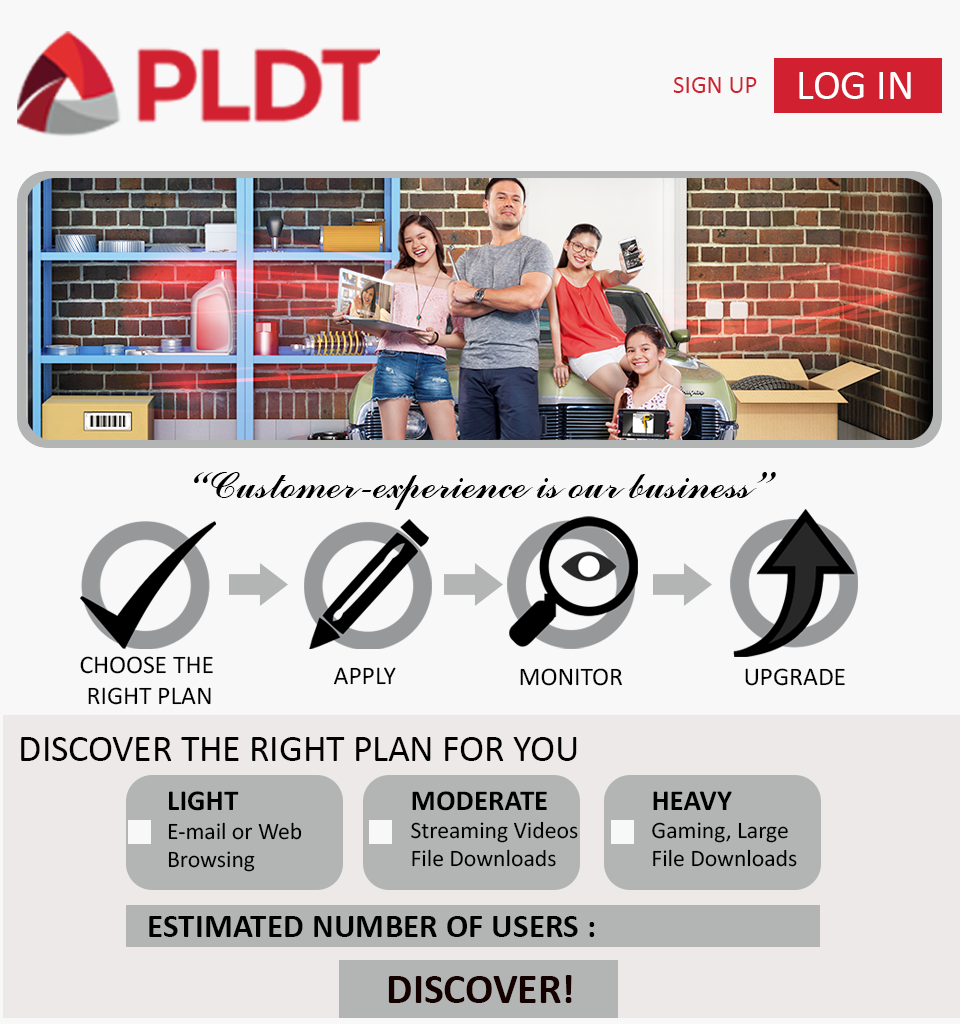
<style>
.page{position:relative;width:960px;height:1024px;background:#f8f8f8}
.page>*{position:absolute;margin:0}
.t1{font:25px "Calibri";color:#d12030}
.t2{font:41.7px "Calibri";color:#ffffff}
.t3{font:41.4px "CommercialScriptBT-Regular";color:#000000}
.t4{font:25.6px "Calibri";color:#000000}
.t5{font:37.5px "Calibri";color:#000000}
.t6{font:23.7px "Calibri";color:#000000}
.t7{font:29.1px "Calibri-Bold";color:#000000}
.t8{font:33.3px "Calibri-Bold";color:#000000}
.t9{font:41.7px "Calibri-Bold";color:#150000}
</style>
<div class="page">
<p class="t1" style="left:673px;top:77px;width:84px;height:16px">SIGN UP</p>
<p class="t2" style="left:799px;top:72px;width:112px;height:27px">LOG IN</p>
<p class="t3" style="left:194px;top:472px;width:582px;height:38px">“Customer-experience is our business”</p>
<p class="t4" style="left:80px;top:656px;width:133px;height:49px;text-align:center">CHOOSE THE <br>RIGHT PLAN</p>
<p class="t4" style="left:333px;top:667px;width:63px;height:18px">APPLY</p>
<p class="t4" style="left:520px;top:668px;width:102px;height:18px">MONITOR</p>
<p class="t4" style="left:745px;top:668px;width:100px;height:18px">UPGRADE</p>
<p class="t5" style="left:21px;top:737px;width:556px;height:24px">DISCOVER THE RIGHT PLAN FOR YOU</p>
<p class="t6" style="left:168px;top:791px;width:134px;height:81px;text-align:right"><span class="t7">LIGHT<br></span>E-mail or Web Browsing</p>
<p class="t6" style="left:411px;top:791px;width:167px;height:76px;text-align:right"><span class="t7">MODERATE<br></span>Streaming Videos<br>File Downloads</p>
<p class="t6" style="left:652px;top:791px;width:145px;height:76px;text-align:right"><span class="t7">HEAVY<br></span>Gaming, Large <br>File Downloads</p>
<p class="t8" style="left:149px;top:916px;width:446px;height:21px">ESTIMATED NUMBER OF USERS :</p>
<p class="t9" style="left:388px;top:975px;width:184px;height:28px">DISCOVER!</p>
</div>
